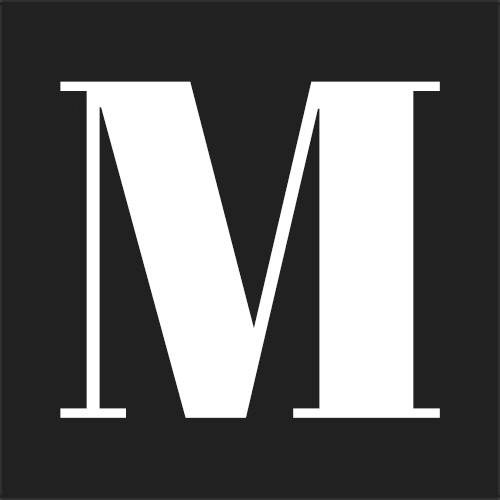
<style>
.page{position:relative;width:500px;height:500px;background:#222121}
.page>*{position:absolute;margin:0}
.t1{font:480px "AbrilFatface-Regular";letter-spacing:-0.05em;color:#ffffff}
</style>
<div class="page">
<p class="t1" style="left:60px;top:81px;width:380px;height:337px">M</p>
</div>
